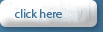
<style>
.page{position:relative;width:103px;height:32px}
.page>*{position:absolute;margin:0}
.t1{font:12px "MyriadPro-Regular";color:#3e7297}
</style>
<div class="page">
<p class="t1" style="left:15px;top:9px;width:47px;height:9px">click here</p>
</div>
